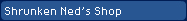
<style>
.page{position:relative;width:187px;height:21px;background:#285692}
.page>*{position:absolute;margin:0}
.t1{font:16px "Foxley816";color:#ffffff}
</style>
<div class="page">
<p class="t1" style="left:5px;top:7px;width:116px;height:10px">Shrunken Ned’s Shop</p>
</div>
